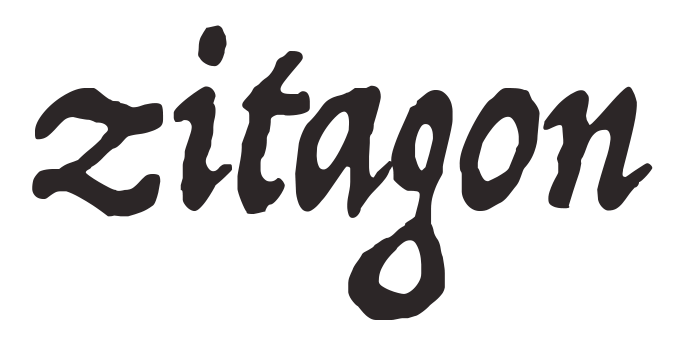
<style>
.page{position:relative;width:687px;height:343px;background:#ffffff}
.page>*{position:absolute;margin:0}
.t1{font:250px "Trattatello";color:#2c2627}
</style>
<div class="page">
<p class="t1" style="left:32px;top:25px;width:621px;height:295px">zitagon</p>
</div>
